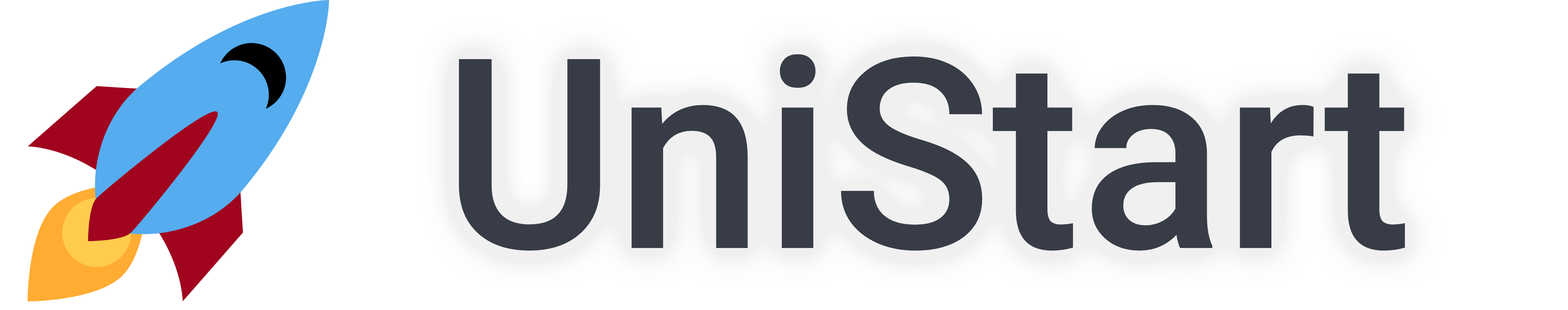
<style>
.page{position:relative;width:1568px;height:310px;background:#ffffff}
.page>*{position:absolute;margin:0}
.t1{font:265.6px "Roboto-Medium";color:#373c46}
</style>
<div class="page">
<p class="t1" style="left:459px;top:54px;width:946px;height:197px">UniStart</p>
</div>
